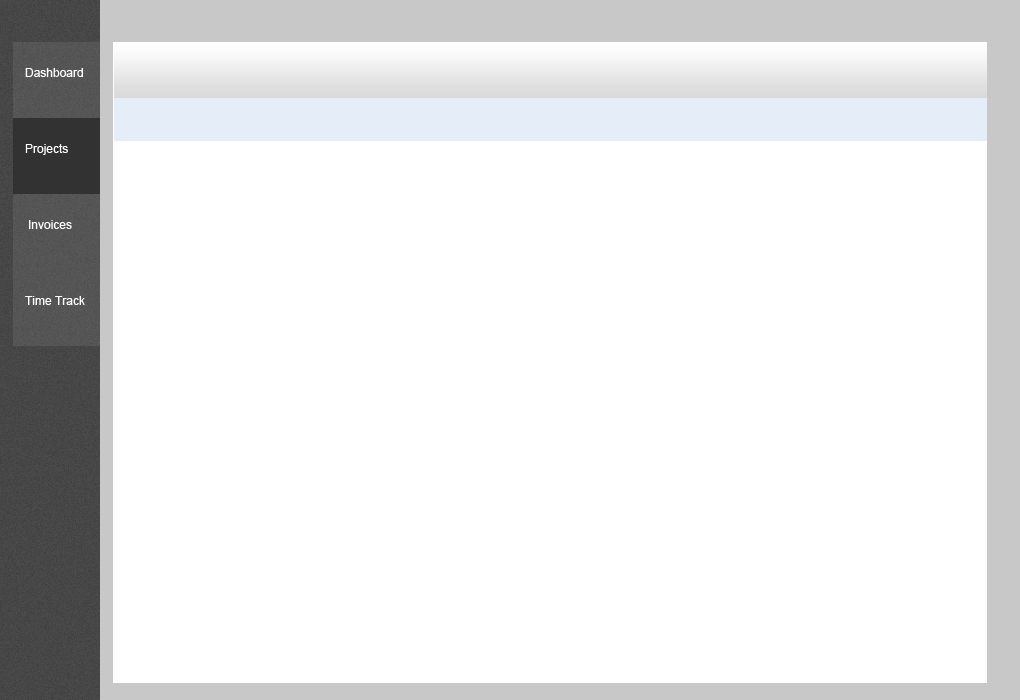
<style>
.page{position:relative;width:1020px;height:700px;background:#ffffff}
.page>*{position:absolute;margin:0}
.t1{font:12px "ArialMT";color:#ffffff}
</style>
<div class="page">
<p class="t1" style="left:25px;top:68px;width:58px;height:9px">Dashboard</p>
<p class="t1" style="left:25px;top:144px;width:43px;height:11px">Projects</p>
<p class="t1" style="left:29px;top:220px;width:43px;height:9px">Invoices</p>
<p class="t1" style="left:25px;top:296px;width:60px;height:9px">Time Track</p>
</div>
